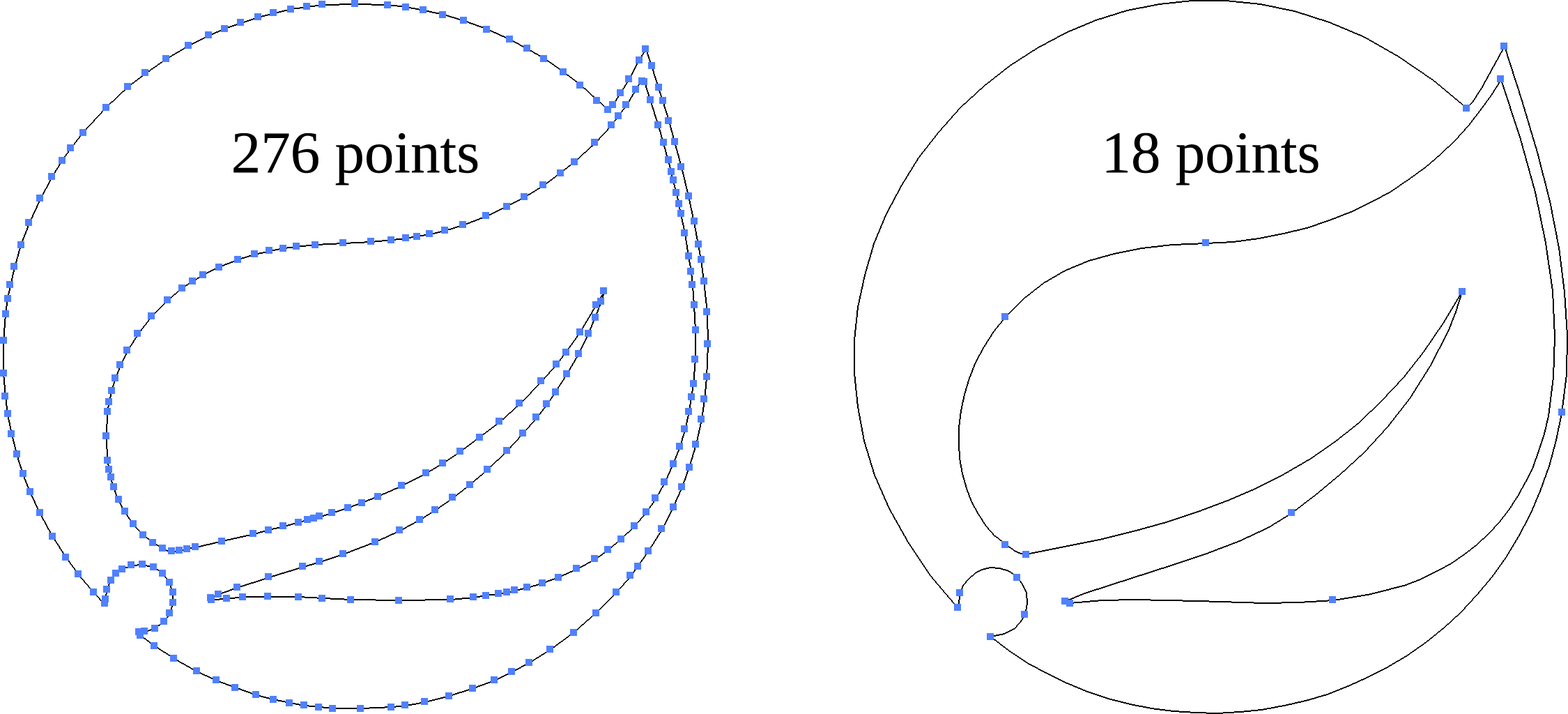
<style>
.page{position:relative;width:1568px;height:714px;background:#ffffff}
.page>*{position:absolute;margin:0}
.t1{font:59.2px "LiberationSerif";color:#000000}
</style>
<div class="page">
<p class="t1" style="left:233px;top:133px;width:245px;height:52px">276 points</p>
<p class="t1" style="left:1106px;top:132px;width:213px;height:53px">18 points</p>
</div>
